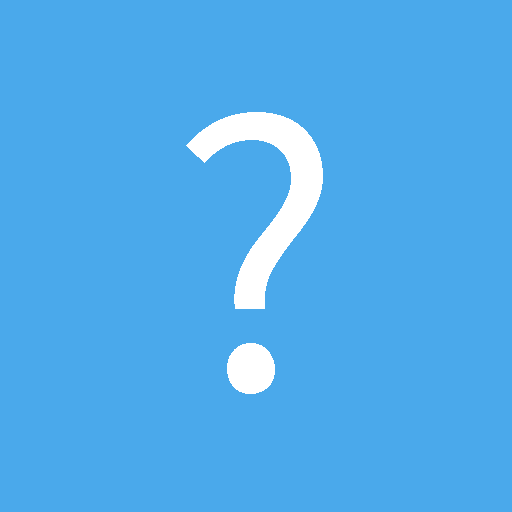
<style>
.page{position:relative;width:512px;height:512px;background:#4aa9eb}
.page>*{position:absolute;margin:0}
.t1{font:363.6px "TaipeiSansTCBeta-Regular";color:#ffffff}
</style>
<div class="page">
<p class="t1" style="left:186px;top:112px;width:137px;height:282px">?</p>
</div>
